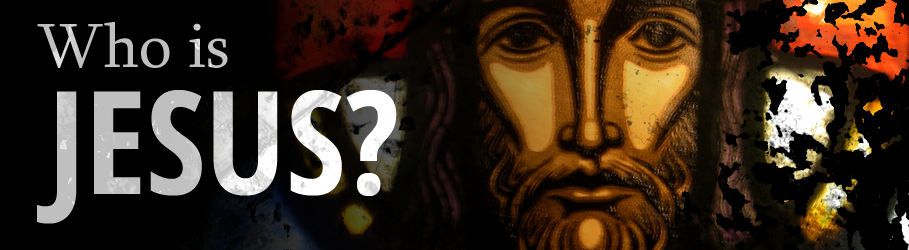
<style>
.page{position:relative;width:909px;height:250px;background:#000000}
.page>*{position:absolute;margin:0}
.t1{font:63.8px "Sylfaen";color:#bfbfbf}
.t2{font:143.5px "OpenSans-CondensedBold"}
</style>
<div class="page">
<p class="t1" style="left:37px;top:22px;width:191px;height:46px">Who is</p>
<p class="t2" style="left:37px;top:90px;width:360px;height:134px">JESUS?</p>
</div>
